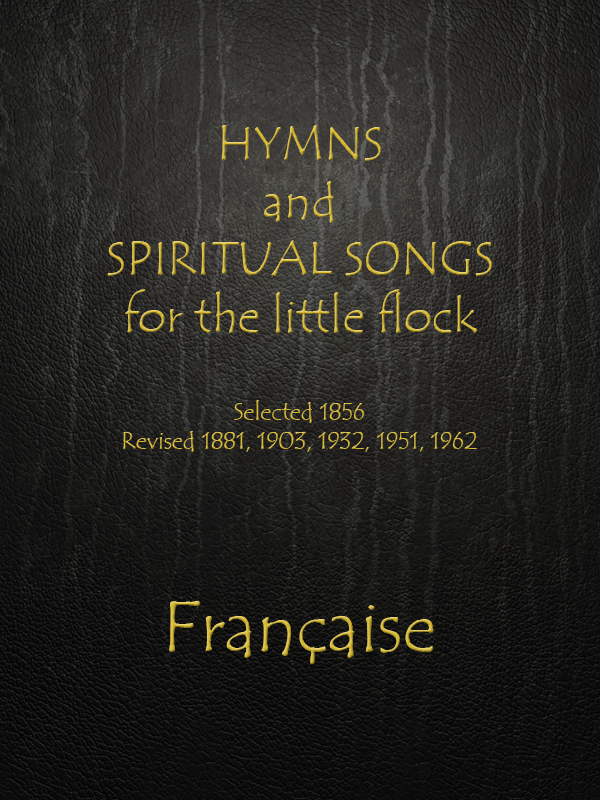
<style>
.page{position:relative;width:600px;height:800px}
.page>*{position:absolute;margin:0}
.t1{font:48px "TempusSansITC"}
.t2{font:24px "TempusSansITC"}
.t3{font:72px "TempusSansITC"}
</style>
<div class="page">
<p class="t1" style="left:107px;top:125px;width:385px;height:208px;text-align:center">HYMNS<br>and<br>SPIRITUAL SONGS<br>for the little flock</p>
<p class="t2" style="left:123px;top:400px;width:354px;height:52px;text-align:center">Selected 1856<br>Revised 1881, 1903, 1932, 1951, 1962</p>
<p class="t3" style="left:169px;top:601px;width:265px;height:63px">Française</p>
</div>
